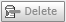
<style>
.page{position:relative;width:66px;height:22px}
.page>*{position:absolute;margin:0}
.t1{font:11.2px "Tahoma";letter-spacing:0.1em;color:#8d8d8d;scale:0.86 1}
</style>
<div class="page">
<p class="t1" style="left:25px;top:6px;width:32px;height:9px">Delete</p>
</div>
